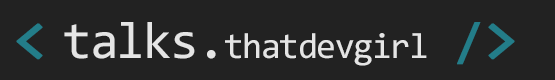
<style>
.page{position:relative;width:555px;height:80px;background:#222222}
.page>*{position:absolute;margin:0}
.t1{font:36px "Consolas";letter-spacing:-0.035em;color:#e5e5e5}
.t2{font:64px "Consolas";letter-spacing:-0.035em;color:#237d89;font-weight:bold}
.t3{font:52px "Consolas";letter-spacing:-0.035em;color:#e5e5e5}
.t4{font:52px "Consolas";letter-spacing:-0.035em;color:#237d89;font-weight:bold}
</style>
<div class="page">
<p class="t1" style="left:16px;top:22px;width:499px;height:44px"><span class="t2">&lt; </span><span class="t3">talks.</span>thatdevgirl <span class="t4">/</span><span class="t2">&gt;</span></p>
</div>
